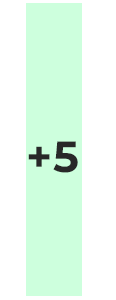
<style>
.page{position:relative;width:116px;height:300px;background:#ffffff}
.page>*{position:absolute;margin:0}
.t1{font:43.5px "Montserrat-Bold";letter-spacing:0.025em;color:#282828;text-transform:uppercase}
</style>
<div class="page">
<p class="t1" style="left:28px;top:141px;width:50px;height:32px">+5</p>
</div>
